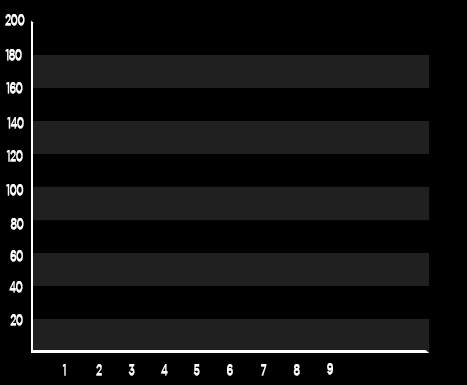
<style>
.page{position:relative;width:467px;height:385px;background:#000000}
.page>*{position:absolute;margin:0}
.t1{font:15.8px "Gotham-Book";letter-spacing:-0.059em;color:#ffffff;font-weight:bold;scale:0.63 1}
</style>
<div class="page">
<p class="t1" style="left:5px;top:14px;width:20px;height:12px">200</p>
<p class="t1" style="left:5px;top:49px;width:17px;height:12px">180</p>
<p class="t1" style="left:6px;top:82px;width:17px;height:12px">160</p>
<p class="t1" style="left:7px;top:117px;width:17px;height:12px">140</p>
<p class="t1" style="left:6px;top:150px;width:17px;height:12px">120</p>
<p class="t1" style="left:6px;top:184px;width:18px;height:12px">100</p>
<p class="t1" style="left:10px;top:218px;width:14px;height:12px">80</p>
<p class="t1" style="left:10px;top:250px;width:13px;height:12px">60</p>
<p class="t1" style="left:9px;top:281px;width:14px;height:12px">40</p>
<p class="t1" style="left:10px;top:314px;width:13px;height:12px">20</p>
<p class="t1" style="left:62px;top:364px;width:4px;height:12px">1</p>
<p class="t1" style="left:96px;top:364px;width:6px;height:12px">2</p>
<p class="t1" style="left:128px;top:364px;width:7px;height:12px">3</p>
<p class="t1" style="left:161px;top:364px;width:7px;height:12px">4</p>
<p class="t1" style="left:193px;top:364px;width:7px;height:12px">5</p>
<p class="t1" style="left:227px;top:364px;width:6px;height:12px">6</p>
<p class="t1" style="left:261px;top:364px;width:6px;height:12px">7</p>
<p class="t1" style="left:293px;top:364px;width:7px;height:12px">8</p>
<p class="t1" style="left:327px;top:363px;width:6px;height:12px">9</p>
</div>
